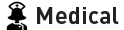
<style>
.page{position:relative;width:124px;height:30px;background:#ffffff}
.page>*{position:absolute;margin:0}
.t1{font:24px "DINPro-Bold";color:#222222}
</style>
<div class="page">
<p class="t1" style="left:37px;top:7px;width:82px;height:18px">Medical</p>
</div>
